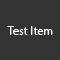
<style>
.page{position:relative;width:60px;height:60px;background:#333333}
.page>*{position:absolute;margin:0}
.t1{font:12px "MyriadPro-Regular";color:#ffffff}
</style>
<div class="page">
<p class="t1" style="left:7px;top:26px;width:46px;height:9px">Test Item</p>
</div>
